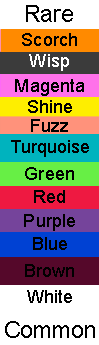
<style>
.page{position:relative;width:99px;height:345px;background:#ffffff}
.page>*{position:absolute;margin:0}
.t1{font:23.1px "ArialMT";color:#000000}
.t2{font:18.2px "ArialMT";color:#000000}
.t3{font:18.2px "ArialMT";color:#ffffff}
</style>
<div class="page">
<p class="t1" style="left:26px;top:5px;width:47px;height:17px">Rare</p>
<p class="t2" style="left:22px;top:33px;width:55px;height:13px">Scorch</p>
<p class="t3" style="left:29px;top:54px;width:40px;height:17px">Wisp</p>
<p class="t2" style="left:15px;top:79px;width:69px;height:17px">Magenta</p>
<p class="t2" style="left:28px;top:100px;width:44px;height:13px">Shine</p>
<p class="t2" style="left:31px;top:119px;width:37px;height:13px">Fuzz</p>
<p class="t2" style="left:11px;top:140px;width:78px;height:17px">Turquoise</p>
<p class="t2" style="left:25px;top:167px;width:49px;height:13px">Green</p>
<p class="t2" style="left:34px;top:190px;width:31px;height:13px">Red</p>
<p class="t2" style="left:24px;top:214px;width:51px;height:17px">Purple</p>
<p class="t2" style="left:33px;top:237px;width:34px;height:13px">Blue</p>
<p class="t2" style="left:25px;top:264px;width:49px;height:13px">Brown</p>
<p class="t2" style="left:27px;top:290px;width:45px;height:13px">White</p>
<p class="t1" style="left:5px;top:321px;width:90px;height:17px">Common</p>
</div>
